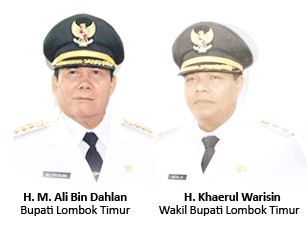
<style>
.page{position:relative;width:307px;height:236px;background:#ffffff}
.page>*{position:absolute;margin:0}
.t1{font:13.3px "Calibri-Bold";letter-spacing:-0.025em;color:#000000}
.t2{font:13.3px "Calibri";letter-spacing:-0.025em;color:#000000}
</style>
<div class="page">
<p class="t1" style="left:24px;top:192px;width:103px;height:9px">H. M. Ali Bin Dahlan</p>
<p class="t1" style="left:184px;top:192px;width:97px;height:9px">H. Khaerul Warisin</p>
<p class="t2" style="left:21px;top:205px;width:110px;height:11px">Bupati Lombok Timur</p>
<p class="t2" style="left:159px;top:205px;width:141px;height:11px">Wakil Bupati Lombok Timur</p>
</div>
